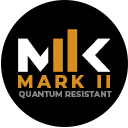
<style>
.page{position:relative;width:128px;height:128px;background:#000000}
.page>*{position:absolute;margin:0}
.t1{font:17.5px "Montserrat-ExtraBold";letter-spacing:0.2em;color:#d79020}
.t2{font:7.5px "Montserrat-Bold";letter-spacing:0.05em;color:#898989}
</style>
<div class="page">
<p class="t1" style="left:18px;top:75px;width:92px;height:13px">MARK II</p>
<p class="t2" style="left:19px;top:91px;width:93px;height:8px">QUANTUM RESISTANT</p>
</div>
